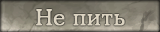
<style>
.page{position:relative;width:160px;height:32px}
.page>*{position:absolute;margin:0}
.t1{font:22px "CooperLightCBT";letter-spacing:0.03em;color:#dbd3c1;font-weight:bold}
</style>
<div class="page">
<p class="t1" style="left:36px;top:9px;width:89px;height:17px">Не пить</p>
</div>
